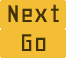
<style>
.page{position:relative;width:66px;height:58px;background:#f3be35}
.page>*{position:absolute;margin:0}
.t1{font:30px "Geo-Regular";color:#443307}
</style>
<div class="page">
<p class="t1" style="left:8px;top:4px;width:51px;height:18px">Next</p>
<p class="t1" style="left:22px;top:34px;width:24px;height:17px">Go</p>
</div>
